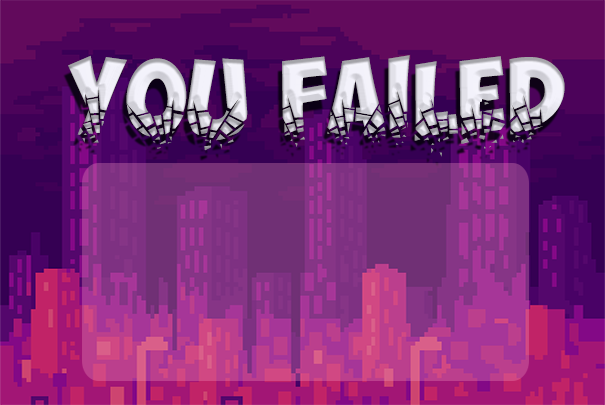
<style>
.page{position:relative;width:605px;height:405px}
.page>*{position:absolute;margin:0}
.t1{font:76px "ObelixProBroken"}
</style>
<div class="page">
<p class="t1" style="left:68px;top:55px;width:180px;height:96px">YOU</p>
<p class="t1" style="left:282px;top:55px;width:283px;height:102px">FAILED</p>
</div>
